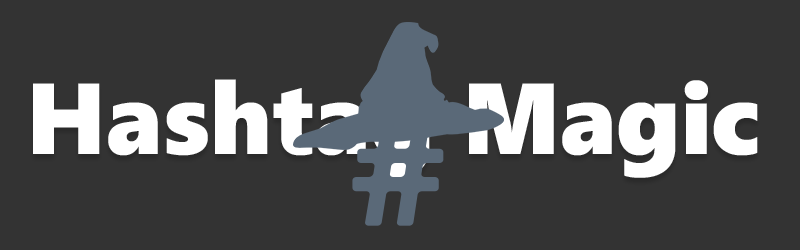
<style>
.page{position:relative;width:800px;height:250px;background:#333333}
.page>*{position:absolute;margin:0}
.t1{font:100.8px "SegoeUIBlack";color:#ffffff}
</style>
<div class="page">
<p class="t1" style="left:33px;top:79px;width:725px;height:99px">Hashtag Magic</p>
</div>
